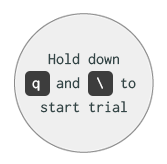
<style>
.page{position:relative;width:167px;height:164px;background:#efefef}
.page>*{position:absolute;margin:0}
.t1{font:16px/24px "Inconsolata";color:#334647}
.t2{font:16px/24px "Inconsolata";color:#ffffff}
</style>
<div class="page">
<p class="t1" style="left:32px;top:53px;width:104px;height:60px;text-align:center">Hold down <br><span class="t2">q </span> and <span class="t2"> \</span>  to<br>start trial</p>
</div>
